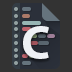
<style>
.page{position:relative;width:72px;height:72px;background:#333333}
.page>*{position:absolute;margin:0}
.t1{font:48.8px "MyriadPro-Bold";color:#eff1f5}
</style>
<div class="page">
<p class="t1" style="left:23px;top:26px;width:26px;height:33px">C</p>
</div>
